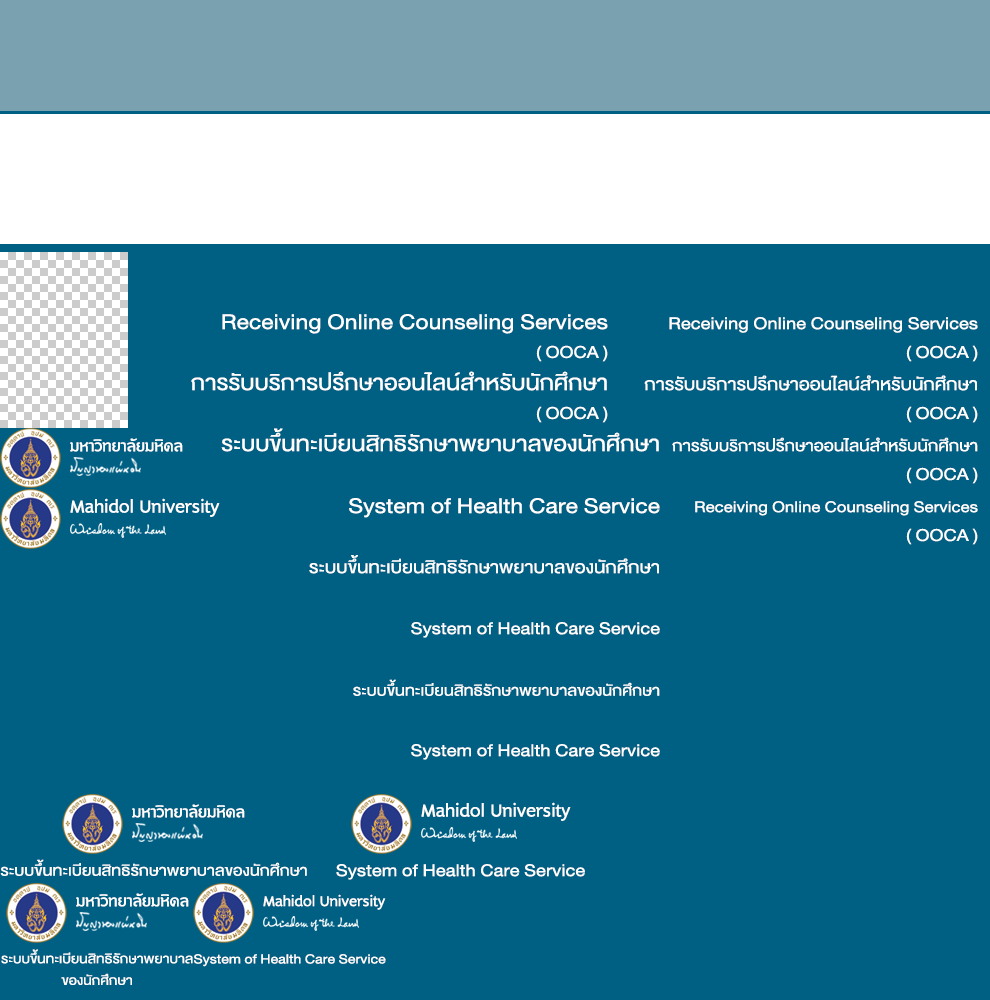
<style>
.page{position:relative;width:990px;height:1000px;background:#006084}
.page>*{position:absolute;margin:0}
.t1{font:30px "DBHelvethaicaX-55Regular";color:#ffffff;scale:1.13 1}
.t2{font:24px "DBHelvethaicaX-55Regular";color:#ffffff;scale:1.13 1}
.t3{font:20px "DBLimX";color:#ffffff}
.t4{font:22px "DBHelvethaicaX-55Regular";color:#ffffff;scale:1.13 1}
.t5{font:22px "DBLimX";color:#ffffff}
.t6{font:21px "DBHelvethaicaX-55Regular";color:#ffffff;scale:1.13 1}
.t7{font:18px "DBLimX";color:#ffffff}
.t8{font:18px "DBHelvethaicaX-55Regular";color:#ffffff;scale:1.13 1}
.t9{font:18.5px "DBHelvethaicaX-55Regular";color:#ffffff;scale:1.13 1}
</style>
<div class="page">
<p class="t1" style="left:222px;top:314px;width:386px;height:48px;text-align:right">Receiving Online Counseling Services<br><span class="t2">( OOCA )</span></p>
<p class="t2" style="left:669px;top:317px;width:309px;height:45px;text-align:right">Receiving Online Counseling Services<br>( OOCA )</p>
<p class="t1" style="left:191px;top:371px;width:417px;height:52px;text-align:right">การรับบริการปรึกษาออนไลน์สำหรับนักศึกษา<br><span class="t2">( OOCA )</span></p>
<p class="t2" style="left:644px;top:375px;width:334px;height:48px;text-align:right">การรับบริการปรึกษาออนไลน์สำหรับนักศึกษา<br>( OOCA )</p>
<p class="t3" style="left:70px;top:438px;width:113px;height:14px">มหาวิทยาลัยมหิดล</p>
<p class="t1" style="left:221px;top:428px;width:438px;height:24px">ระบบขึ้นทะเบียนสิทธิรักษาพยาบาลของนักศึกษา</p>
<p class="t4" style="left:672px;top:437px;width:306px;height:47px;text-align:right">การรับบริการปรึกษาออนไลน์สำหรับนักศึกษา<br><span class="t2">( OOCA )</span></p>
<p class="t5" style="left:70px;top:498px;width:150px;height:19px">Mahidol University</p>
<p class="t1" style="left:349px;top:498px;width:311px;height:20px">System of Health Care Service</p>
<p class="t4" style="left:695px;top:501px;width:283px;height:44px;text-align:right">Receiving Online Counseling Services<br><span class="t2">( OOCA )</span></p>
<p class="t2" style="left:309px;top:555px;width:350px;height:19px">ระบบขึ้นทะเบียนสิทธิรักษาพยาบาลของนักศึกษา</p>
<p class="t2" style="left:411px;top:622px;width:249px;height:16px">System of Health Care Service</p>
<p class="t6" style="left:353px;top:679px;width:307px;height:17px">ระบบขึ้นทะเบียนสิทธิรักษาพยาบาลของนักศึกษา</p>
<p class="t2" style="left:411px;top:744px;width:249px;height:16px">System of Health Care Service</p>
<p class="t3" style="left:132px;top:804px;width:113px;height:14px">มหาวิทยาลัยมหิดล</p>
<p class="t5" style="left:421px;top:802px;width:150px;height:19px">Mahidol University</p>
<p class="t6" style="left:0px;top:859px;width:307px;height:17px">ระบบขึ้นทะเบียนสิทธิรักษาพยาบาลของนักศึกษา</p>
<p class="t2" style="left:336px;top:864px;width:249px;height:16px">System of Health Care Service</p>
<p class="t3" style="left:76px;top:893px;width:113px;height:14px">มหาวิทยาลัยมหิดล</p>
<p class="t7" style="left:263px;top:894px;width:123px;height:16px">Mahidol University</p>
<p class="t8" style="left:1px;top:949px;width:192px;height:36px;text-align:center">ระบบขึ้นทะเบียนสิทธิรักษาพยาบาล<br>ของนักศึกษา</p>
<p class="t9" style="left:194px;top:954px;width:192px;height:13px">System of Health Care Service</p>
</div>
